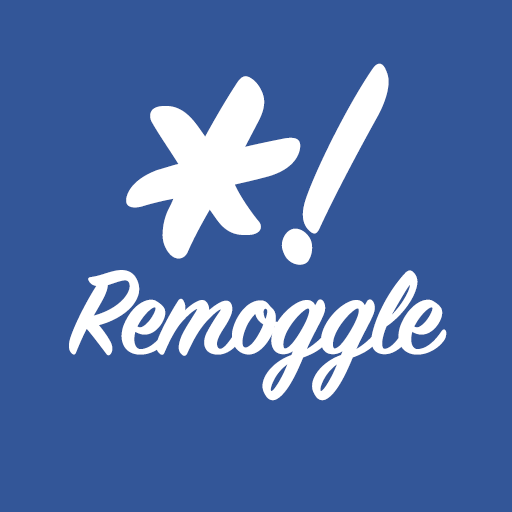
<style>
.page{position:relative;width:512px;height:512px;background:#335698}
.page>*{position:absolute;margin:0}
.t1{font:308.6px "SignPainter-HouseScriptSemibold";letter-spacing:-0.025em;color:#ffffff}
.t2{font:566px "SignPainter-HouseScriptSemibold";letter-spacing:-0.025em;color:#ffffff}
.t3{font:131.9px "SignPainter-HouseScriptSemibold";letter-spacing:-0.025em;color:#ffffff}
</style>
<div class="page">
<p class="t1" style="left:281px;top:63px;width:108px;height:202px">!</p>
<p class="t2" style="left:126px;top:76px;width:175px;height:183px">*</p>
<p class="t3" style="left:69px;top:270px;width:378px;height:131px">Remoggle</p>
</div>
